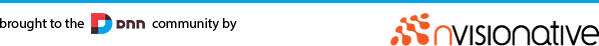
<style>
.page{position:relative;width:599px;height:46px;background:#ffffff}
.page>*{position:absolute;margin:0}
.t1{font:14px "MyriadPro-Regular";color:#000000}
</style>
<div class="page">
<p class="t1" style="left:0px;top:18px;width:237px;height:14px">brought to the                       community by</p>
</div>
